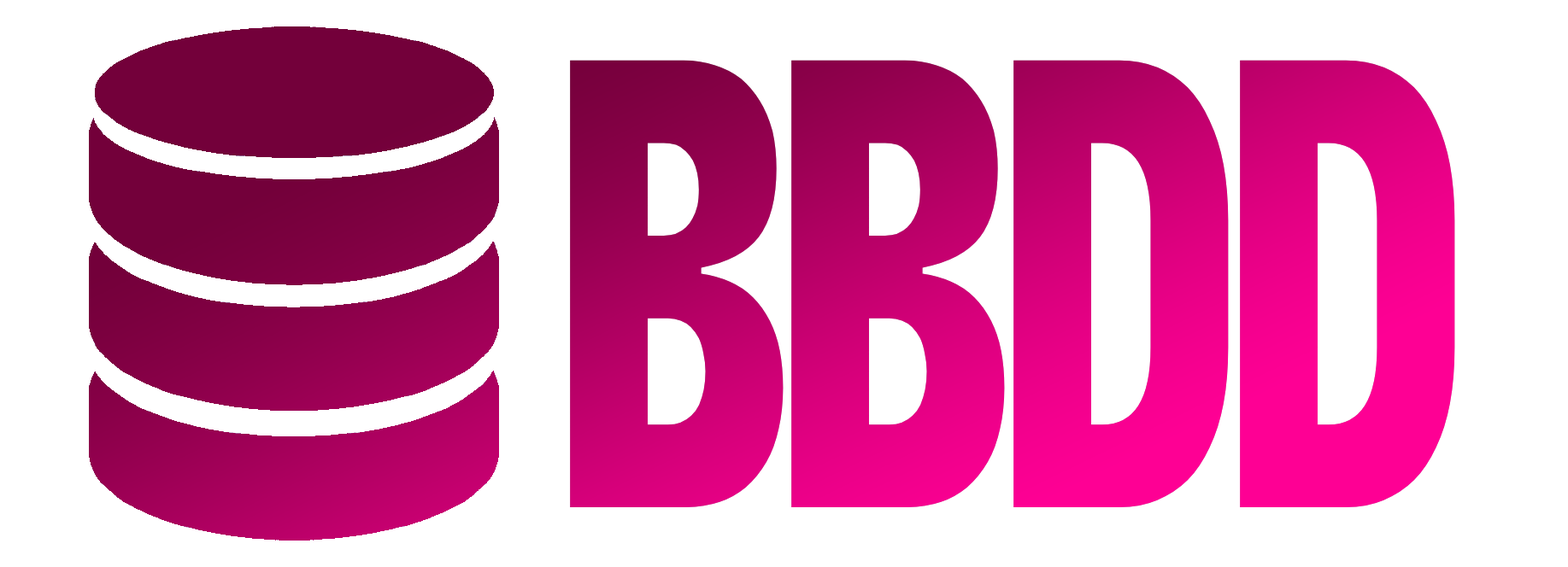
<style>
.page{position:relative;width:1568px;height:567px;background:#ffffff}
.page>*{position:absolute;margin:0}
.t1{font:375.8px "Boldonse-Regular";letter-spacing:-0.06em;scale:0.88 1}
</style>
<div class="page">
<p class="t1" style="left:570px;top:60px;width:885px;height:448px">BBDD</p>
</div>
